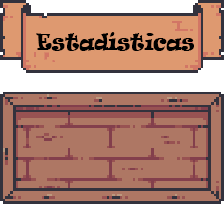
<style>
.page{position:relative;width:224px;height:204px;background:#ae7764}
.page>*{position:absolute;margin:0}
.t1{font:20.9px "Ravie";color:#000000;scale:0.86 1}
</style>
<div class="page">
<p class="t1" style="left:36px;top:32px;width:158px;height:19px">Estadísticas</p>
</div>
